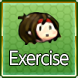
<style>
.page{position:relative;width:78px;height:78px}
.page>*{position:absolute;margin:0}
.t1{font:18px "UDShinGoPro-Regular";letter-spacing:-0.04em;color:#ffffff;scale:0.9 1}
</style>
<div class="page">
<p class="t1" style="left:10px;top:50px;width:59px;height:16px">Exercise</p>
</div>
